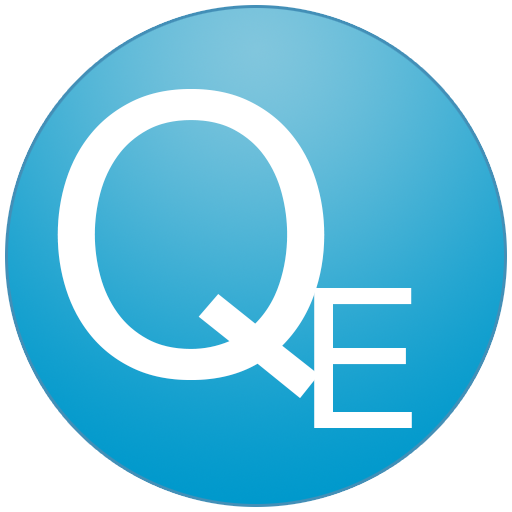
<style>
.page{position:relative;width:512px;height:512px;background:#ffffff}
.page>*{position:absolute;margin:0}
.t1{font:389.4px "HelveticaNeue";color:#ffffff}
.t2{font:195.8px "HelveticaNeue";color:#ffffff}
</style>
<div class="page">
<p class="t1" style="left:57px;top:89px;width:268px;height:309px">Q</p>
<p class="t2" style="left:314px;top:288px;width:98px;height:140px">E</p>
</div>
